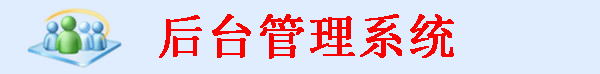
<style>
.page{position:relative;width:600px;height:74px;background:#e0edfe}
.page>*{position:absolute;margin:0}
.t1{font:48px "SimSun";letter-spacing:0.02em;color:#f80101;font-weight:bold}
</style>
<div class="page">
<p class="t1" style="left:159px;top:14px;width:295px;height:45px">后台管理系统</p>
</div>
